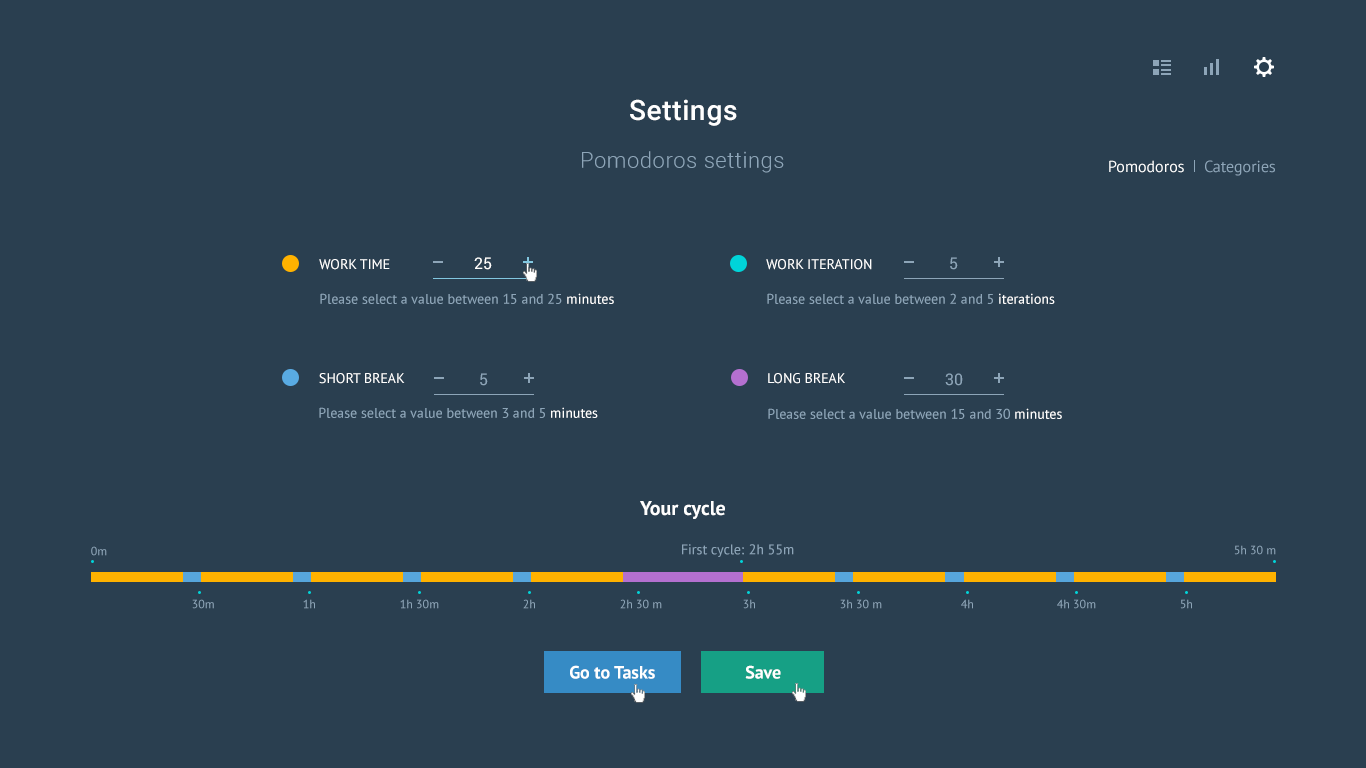
<style>
.page{position:relative;width:1366px;height:768px;background:#2a3f50}
.page>*{position:absolute;margin:0}
.t1{font:28px "Roboto-Medium";letter-spacing:0.025em;color:#ffffff}
.t2{font:22px "Roboto-Light";letter-spacing:0.025em;color:#8da5b8}
.t3{font:16px "PTSans-Regular";color:#ffffff}
.t4{font:16px "PTSans-Regular";color:#8da5b8}
.t5{font:16px "Roboto-Regular";color:#fffffe}
.t6{font:16px "Roboto-Regular";color:#8da5b8}
.t7{font:14px "PTSans-Regular";color:#ffffff;text-transform:uppercase}
.t8{font:14px "PTSans-Regular";color:#8da5b8}
.t9{font:14px "PTSans-Regular";color:#ffffff}
.t10{font:20px "PTSans-Bold";color:#ffffff}
.t11{font:12px "PTSans-Regular";color:#8da5b8}
.t12{font:18px "PTSans-Bold";color:#ffffff}
</style>
<div class="page">
<p class="t1" style="left:630px;top:99px;width:107px;height:27px">Settings</p>
<p class="t2" style="left:582px;top:151px;width:202px;height:22px">Pomodoros settings</p>
<p class="t3" style="left:1109px;top:160px;width:75px;height:13px">Pomodoros</p>
<p class="t4" style="left:1205px;top:160px;width:70px;height:16px">Categories</p>
<p class="t5" style="left:474px;top:257px;width:18px;height:13px">25</p>
<p class="t6" style="left:950px;top:257px;width:8px;height:13px">5</p>
<p class="t7" style="left:319px;top:259px;width:71px;height:11px">Work Time</p>
<p class="t7" style="left:766px;top:259px;width:106px;height:11px">Work Iteration</p>
<p class="t8" style="left:320px;top:293px;width:294px;height:11px">Please select a value between 15 and 25 <span class="t9">minutes</span></p>
<p class="t8" style="left:767px;top:293px;width:288px;height:11px">Please select a value between 2 and 5 <span class="t9">iterations</span></p>
<p class="t7" style="left:319px;top:373px;width:86px;height:11px">Short Break</p>
<p class="t6" style="left:480px;top:373px;width:8px;height:13px">5</p>
<p class="t7" style="left:768px;top:373px;width:77px;height:11px">Long Break</p>
<p class="t6" style="left:945px;top:373px;width:18px;height:13px">30</p>
<p class="t8" style="left:319px;top:407px;width:279px;height:11px">Please select a value between 3 and 5<span class="t9"> minutes</span></p>
<p class="t8" style="left:768px;top:408px;width:294px;height:11px">Please select a value between 15 and 30 <span class="t9">minutes</span></p>
<p class="t10" style="left:640px;top:501px;width:85px;height:18px">Your cycle</p>
<p class="t8" style="left:682px;top:544px;width:62px;height:13px">First cycle:</p>
<p class="t8" style="left:749px;top:544px;width:45px;height:11px">2h 55m</p>
<p class="t11" style="left:1234px;top:545px;width:42px;height:10px">5h 30 m</p>
<p class="t11" style="left:91px;top:546px;width:16px;height:10px">0m</p>
<p class="t11" style="left:192px;top:599px;width:22px;height:10px">30m</p>
<p class="t11" style="left:303px;top:599px;width:12px;height:10px">1h</p>
<p class="t11" style="left:400px;top:599px;width:39px;height:10px">1h 30m</p>
<p class="t11" style="left:523px;top:599px;width:12px;height:10px">2h</p>
<p class="t11" style="left:620px;top:599px;width:42px;height:10px">2h 30 m</p>
<p class="t11" style="left:743px;top:599px;width:12px;height:10px">3h</p>
<p class="t11" style="left:840px;top:599px;width:42px;height:10px">3h 30 m</p>
<p class="t11" style="left:961px;top:599px;width:12px;height:10px">4h</p>
<p class="t11" style="left:1057px;top:599px;width:39px;height:10px">4h 30m</p>
<p class="t11" style="left:1180px;top:599px;width:12px;height:10px">5h</p>
<p class="t12" style="left:570px;top:665px;width:85px;height:14px">Go to Tasks</p>
<p class="t12" style="left:745px;top:665px;width:36px;height:14px">Save</p>
</div>
